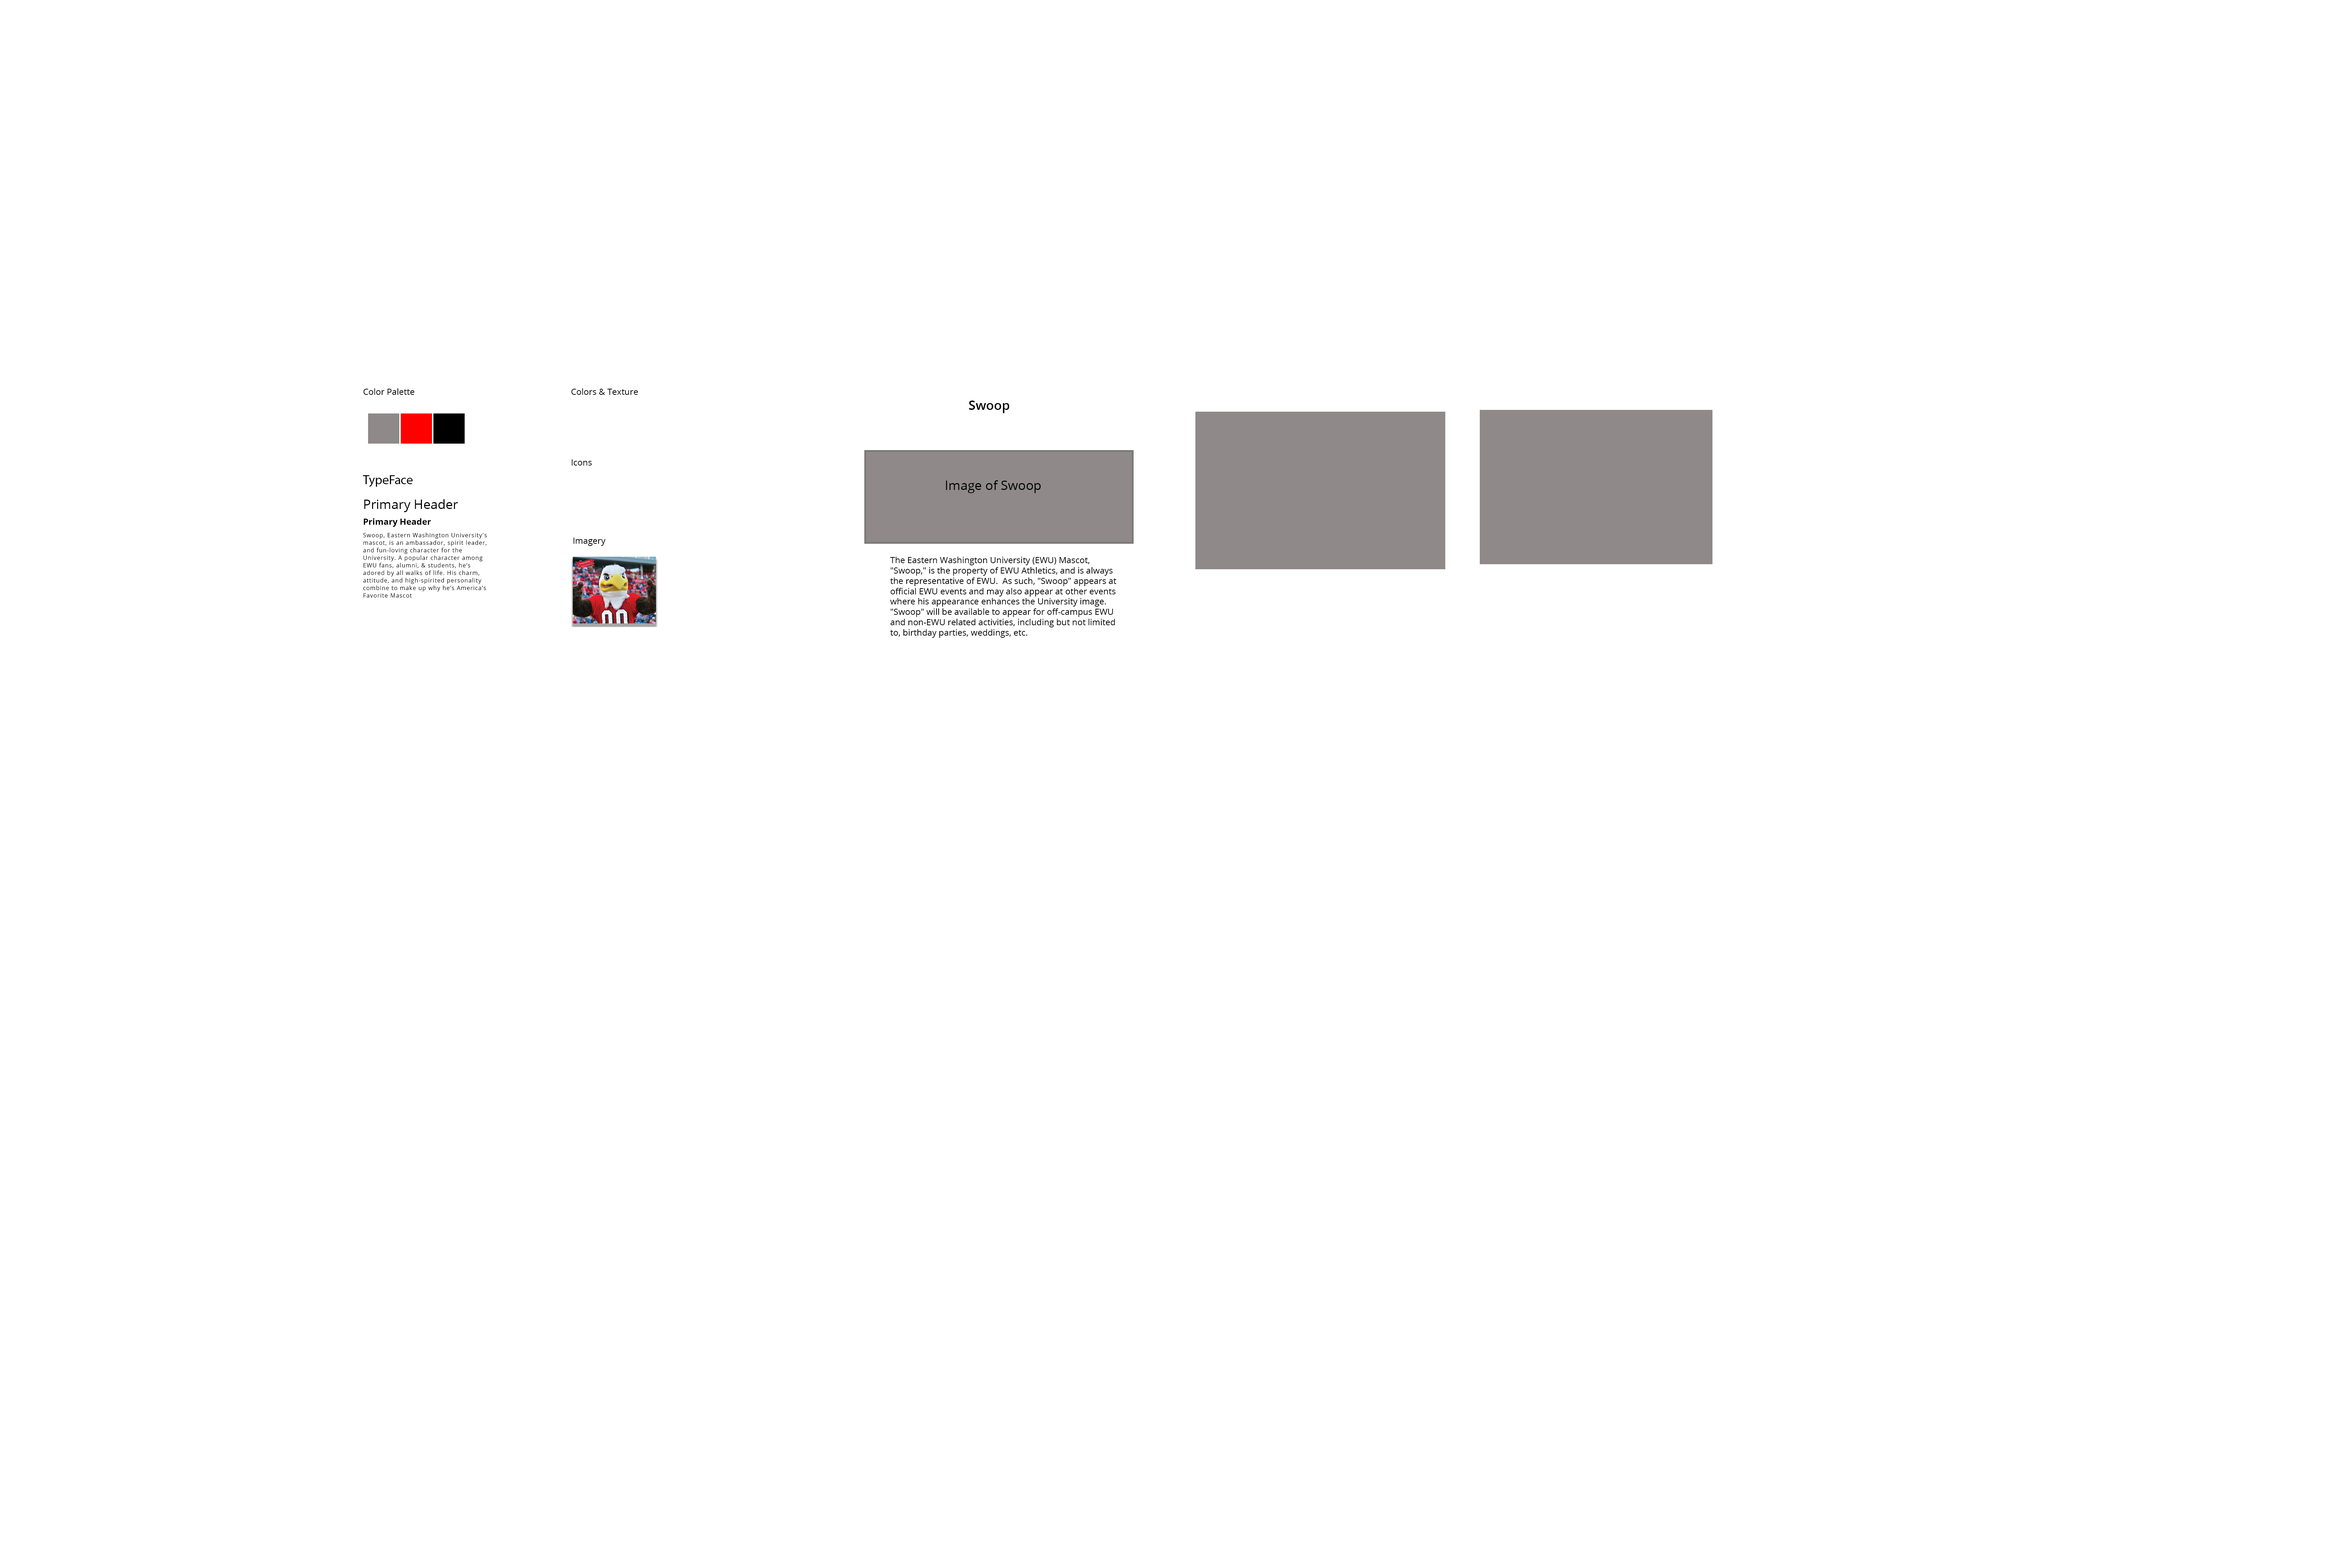
<style>
.page{position:relative;width:2329px;height:1562px;background:#ffffff}
.page>*{position:absolute;margin:0}
.t1{font:8.6px "OpenSans";color:#000000}
.t2{font:12.9px "OpenSans-Semibold";color:#000000}
.t3{font:12.9px "MyriadPro-Regular";color:#000000}
.t4{font:12.9px "OpenSans";color:#000000}
.t5{font:8.6px "OpenSans-Bold";color:#000000}
.t6{font:4.3px "MyriadPro-Regular";color:#000000}
</style>
<div class="page">
<p class="t1" style="left:363px;top:388px;width:51px;height:7px">Color Palette</p>
<p class="t1" style="left:571px;top:388px;width:67px;height:7px">Colors &amp; Texture</p>
<p class="t2" style="left:969px;top:401px;width:40px;height:12px">Swoop</p>
<p class="t1" style="left:572px;top:460px;width:20px;height:6px">Icons</p>
<p class="t3" style="left:363px;top:475px;width:50px;height:12px">TypeFace</p>
<p class="t4" style="left:946px;top:480px;width:94px;height:13px">Image of Swoop</p>
<p class="t4" style="left:364px;top:499px;width:94px;height:13px">Primary Header</p>
<p class="t5" style="left:364px;top:518px;width:67px;height:9px">Primary Header</p>
<p class="t6" style="left:363px;top:533px;width:124px;height:65px">Swoop, Eastern Washington University's mascot, is an ambassador, spirit leader, and fun-loving character for the University. A popular character among EWU fans, alumni, &amp; students, he’s adored by all walks of life. His charm, attitude, and high-spirited personality combine to make up why he’s America’s Favorite Mascot</p>
<p class="t1" style="left:573px;top:538px;width:32px;height:8px">Imagery</p>
<p class="t1" style="left:890px;top:557px;width:226px;height:81px">The Eastern Washington University (EWU) Mascot, "Swoop," is the property of EWU Athletics, and is always the representative of EWU.  As such, "Swoop" appears at official EWU events and may also appear at other events where his appearance enhances the University image.  "Swoop" will be available to appear for off-campus EWU and non-EWU related activities, including but not limited to, birthday parties, weddings, etc.</p>
</div>
